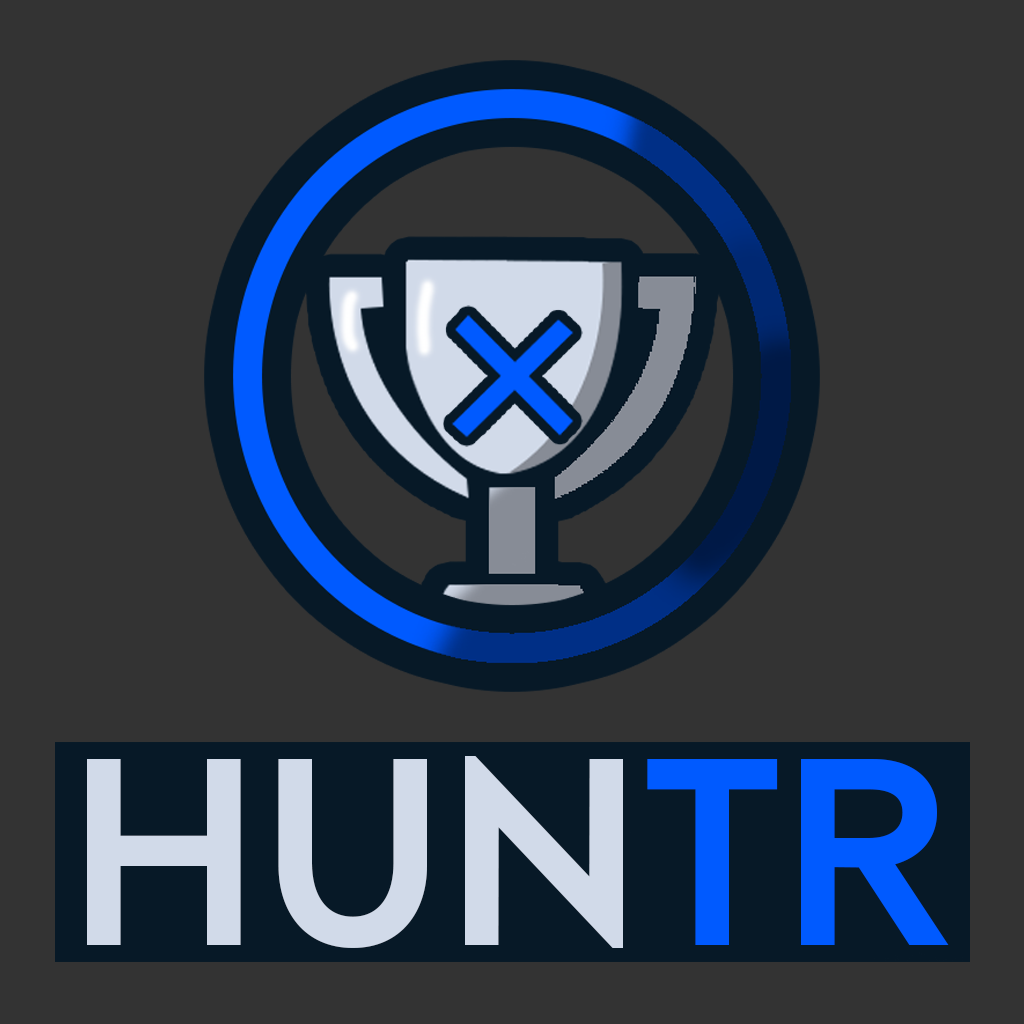
<style>
.page{position:relative;width:1024px;height:1024px;background:#333333}
.page>*{position:absolute;margin:0}
.t1{font:257px "LitSans-Medium";color:#d1dae9}
.t2{font:257px "LitSans-Medium";color:#005aff}
</style>
<div class="page">
<p class="t1" style="left:87px;top:756px;width:862px;height:192px">HUN<span class="t2">TR</span></p>
</div>
